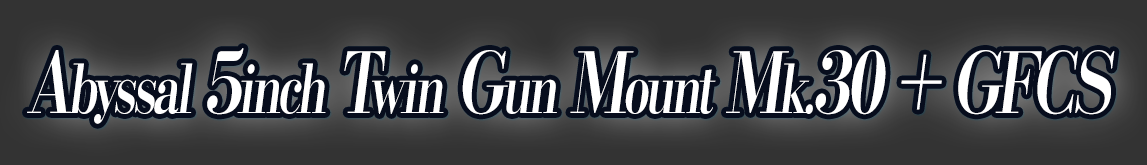
<style>
.page{position:relative;width:1147px;height:165px;background:#333333}
.page>*{position:absolute;margin:0}
.t1{font:84px "KochoStd-Heavy";letter-spacing:-0.08em;color:#ffffff;font-style:italic;scale:0.72 1}
.t2{font:67.2px "KochoStd-Heavy";letter-spacing:-0.08em;color:#ffffff;font-style:italic;scale:0.72 1}
</style>
<div class="page">
<p class="t1" style="left:27px;top:48px;width:1088px;height:76px">A<span class="t2">byssal</span> 5<span class="t2">inch</span> T<span class="t2">win</span> G<span class="t2">un</span> M<span class="t2">ount</span> M<span class="t2">k.</span>30 + GFCS</p>
</div>
